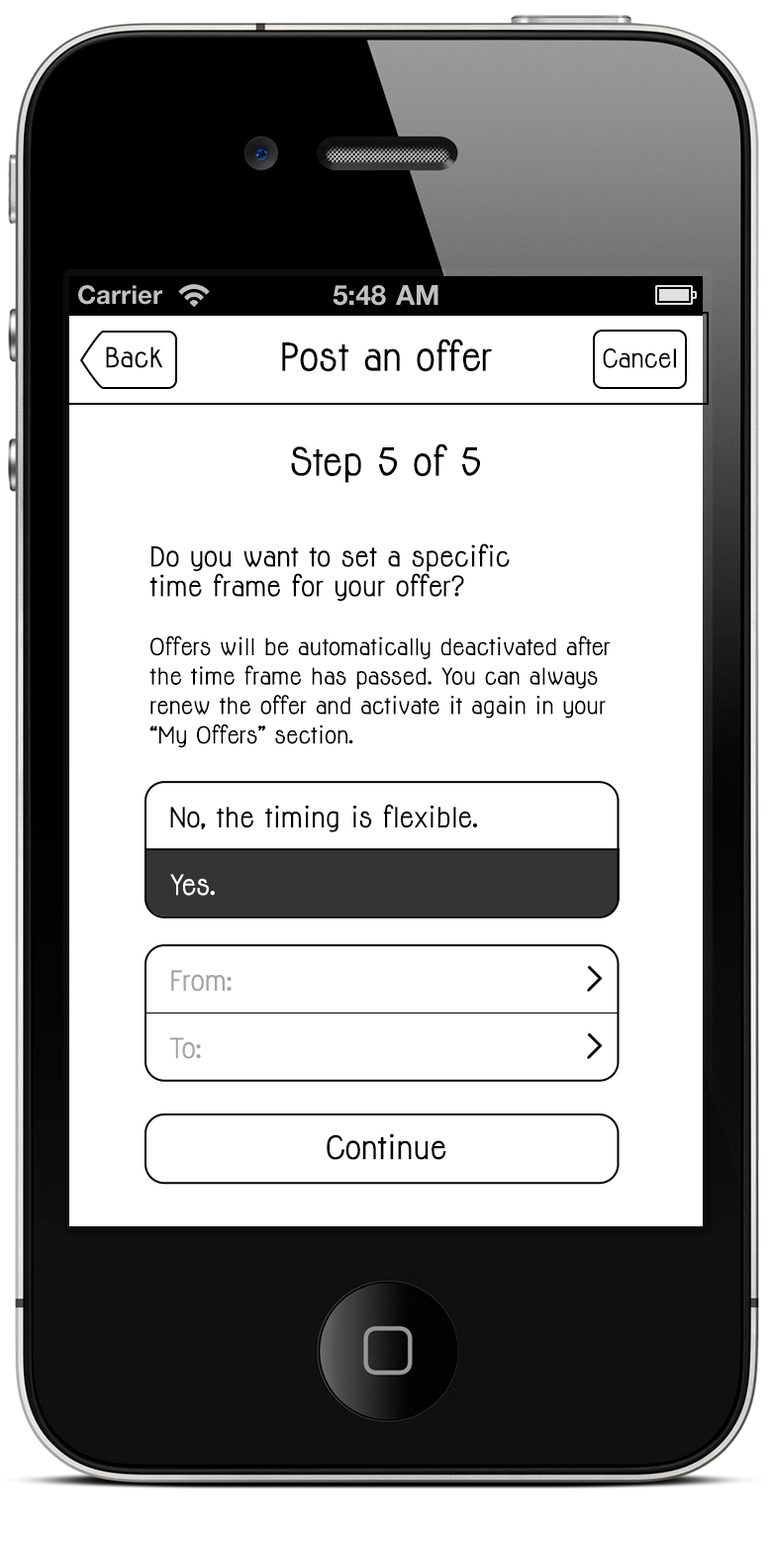
<style>
.page{position:relative;width:772px;height:1545px;background:#ffffff}
.page>*{position:absolute;margin:0}
.t1{font:35.6px "Jolly-Bold";color:#000000}
.t2{font:25.7px "Jolly-Bold";color:#000000}
.t3{font:23.8px "Jolly-Bold";color:#000000}
.t4{font:21.6px/29.5px "Jolly-Bold";color:#000000}
.t5{font:25.5px/29.5px "Jolly-Bold";color:#000000}
.t6{font:25.7px "Jolly-Bold";color:#ffffff}
.t7{font:25.7px "Jolly-Bold";color:#a3a3a3}
.t8{font:29.8px "Jolly-Bold";color:#000000}
</style>
<div class="page">
<p class="t1" style="left:282px;top:338px;width:210px;height:34px">Post an offer</p>
<p class="t2" style="left:106px;top:346px;width:57px;height:22px">Back</p>
<p class="t3" style="left:603px;top:348px;width:73px;height:20px">Cancel</p>
<p class="t1" style="left:291px;top:443px;width:189px;height:40px">Step 5 of 5</p>
<p class="t4" style="left:149px;top:543px;width:462px;height:205px"><span class="t5">Do you want to set a specific <br>time frame for your offer?<br><br></span>Offers will be automatically deactivated after the time frame has passed. You can always renew the offer and activate it again in your “My Offers” section.</p>
<p class="t2" style="left:170px;top:804px;width:308px;height:28px">No, the timing is flexible.</p>
<p class="t6" style="left:170px;top:874px;width:45px;height:22px">Yes.</p>
<p class="t7" style="left:171px;top:970px;width:61px;height:22px">From:</p>
<p class="t7" style="left:170px;top:1037px;width:31px;height:22px">To:</p>
<p class="t8" style="left:327px;top:1133px;width:119px;height:27px">Continue</p>
</div>
